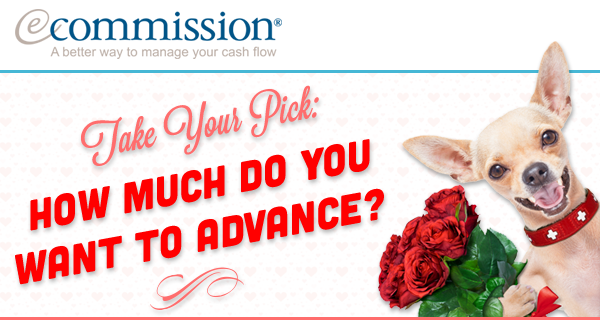
<style>
.page{position:relative;width:600px;height:320px;background:#ffffff}
.page>*{position:absolute;margin:0}
.t1{font:41.1px "Lavanderia-Sturdy";color:#ff6d6d;scale:0.95 1}
.t2{font:43.3px "Cubano-Regular";color:#ff0000;scale:0.95 1}
</style>
<div class="page">
<p class="t1" style="left:81px;top:85px;width:238px;height:81px;rotate:-10deg">Take Your Pick:</p>
<p class="t2" style="left:15px;top:139px;width:369px;height:146px;text-align:center;rotate:-10deg">How Much do You<br>Want to Advance?</p>
</div>
